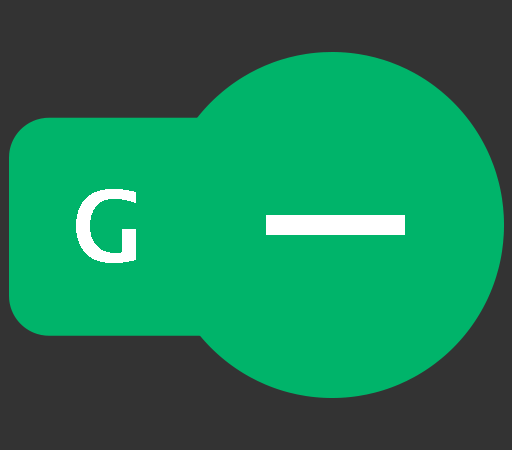
<style>
.page{position:relative;width:512px;height:450px;background:#00b46a}
.page>*{position:absolute;margin:0}
.t1{font:96.9px "LucidaSans-Demi";color:#ffffff}
</style>
<div class="page">
<p class="t1" style="left:76px;top:189px;width:60px;height:74px">G</p>
</div>
